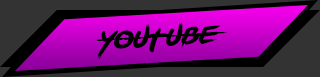
<style>
.page{position:relative;width:320px;height:77px;background:#333333}
.page>*{position:absolute;margin:0}
.t1{font:33.2px "BRUSHSTRIKE";color:#000000;text-transform:uppercase}
</style>
<div class="page">
<p class="t1" style="left:96px;top:22px;width:131px;height:38px;rotate:-3deg">Youtube</p>
</div>
